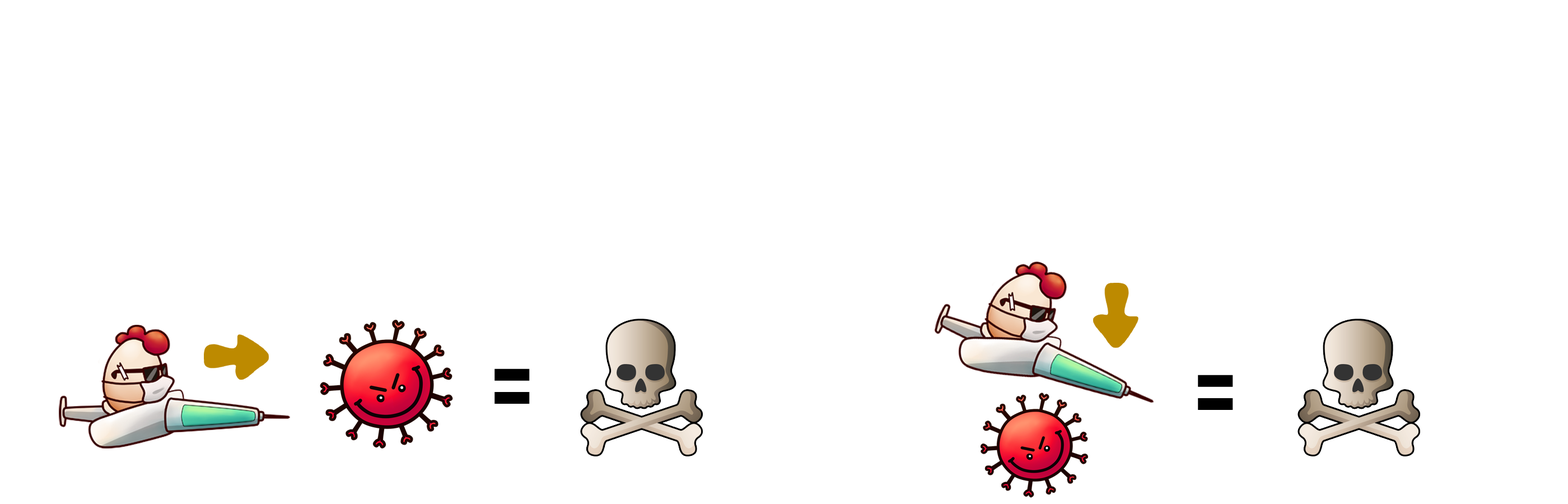
<style>
.page{position:relative;width:1568px;height:504px;background:#ffffff}
.page>*{position:absolute;margin:0}
.t1{font:118px "AeroMaticsRegular";color:#000000}
</style>
<div class="page">
<p class="t1" style="left:494px;top:368px;width:36px;height:36px">=</p>
<p class="t1" style="left:1198px;top:375px;width:35px;height:35px">=</p>
</div>
